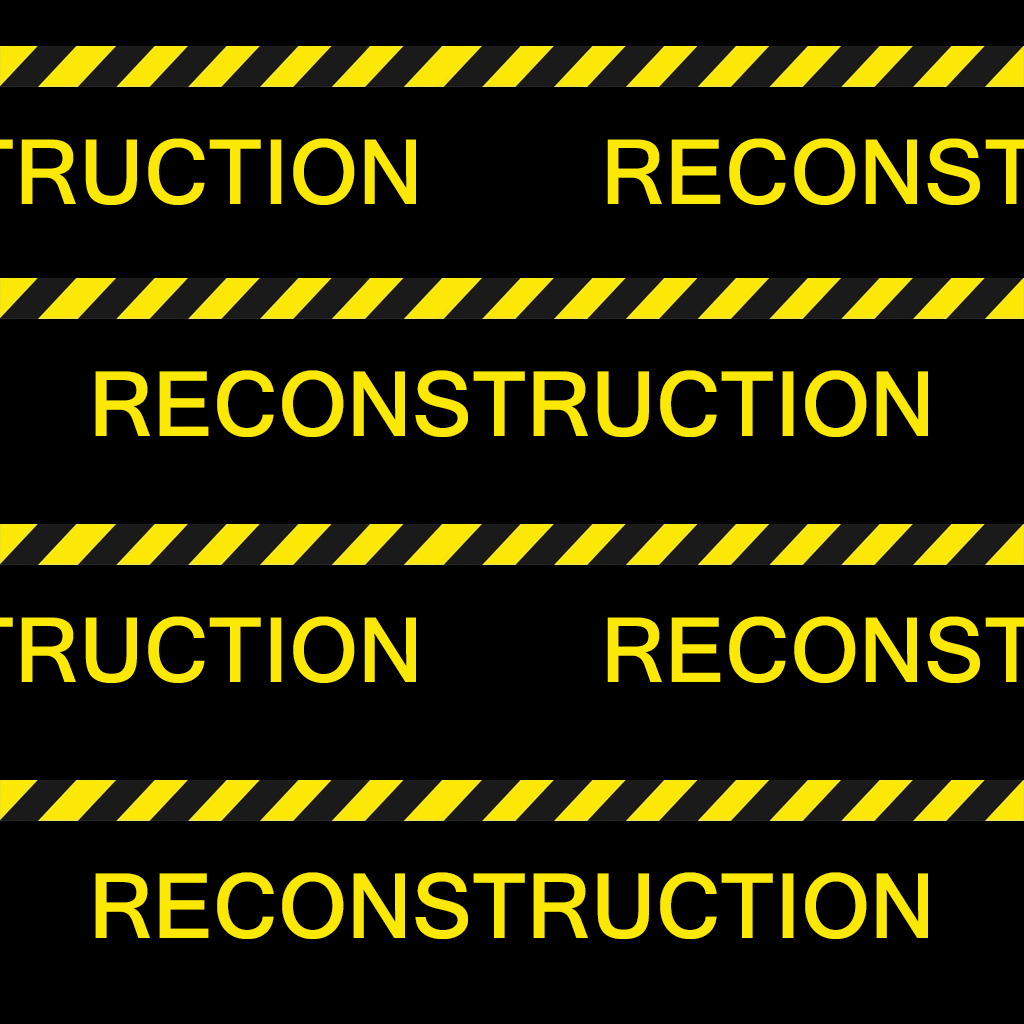
<style>
.page{position:relative;width:1024px;height:1024px;background:#000000}
.page>*{position:absolute;margin:0}
.t1{font:97.5px "Shruti-Bold";color:#fbe905}
</style>
<div class="page">
<p class="t1" style="left:95px;top:370px;width:833px;height:67px">RECONSTRUCTION</p>
<p class="t1" style="left:95px;top:872px;width:833px;height:67px">RECONSTRUCTION</p>
</div>
